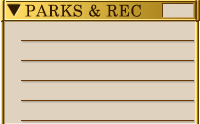
<style>
.page{position:relative;width:200px;height:124px;background:#dfd3c0}
.page>*{position:absolute;margin:0}
.t1{font:16px "CenturySchoolbook";letter-spacing:0.025em;color:#321a02}
</style>
<div class="page">
<p class="t1" style="left:25px;top:4px;width:116px;height:13px">PARKS &amp; REC</p>
</div>
